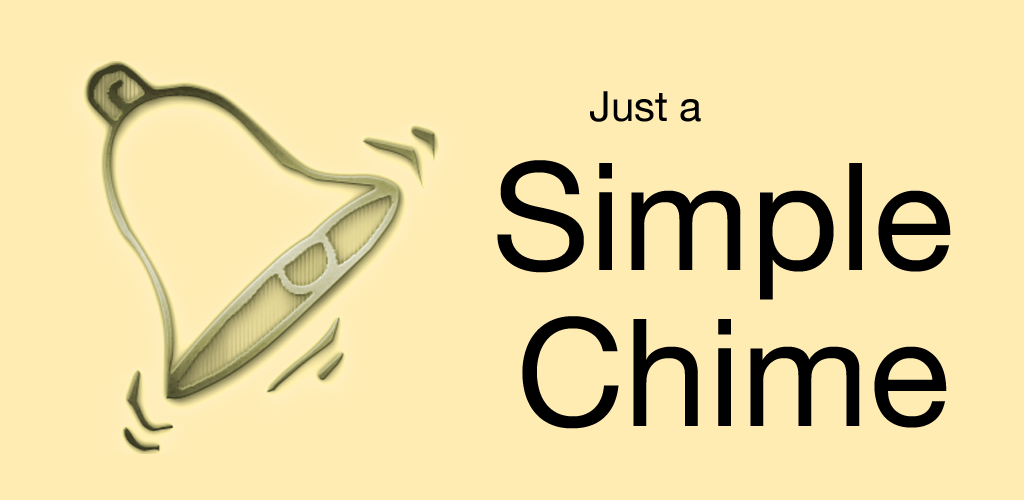
<style>
.page{position:relative;width:1024px;height:500px;background:#ffecb3}
.page>*{position:absolute;margin:0}
.t1{font:41.7px "HelveticaNeue";color:#000000}
.t2{font:150px "HelveticaNeue";color:#000000}
</style>
<div class="page">
<p class="t1" style="left:590px;top:91px;width:111px;height:31px">Just a</p>
<p class="t2" style="left:497px;top:160px;width:454px;height:140px">Simple</p>
<p class="t2" style="left:522px;top:316px;width:425px;height:113px">Chime</p>
</div>
